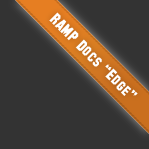
<style>
.page{position:relative;width:149px;height:149px;background:#333333}
.page>*{position:absolute;margin:0}
.t1{font:16px "SFCollegiateSolid";color:#ffffff}
</style>
<div class="page">
<p class="t1" style="left:49px;top:12px;width:89px;height:84px;rotate:45deg">RAMP Docs “Edge”</p>
</div>
